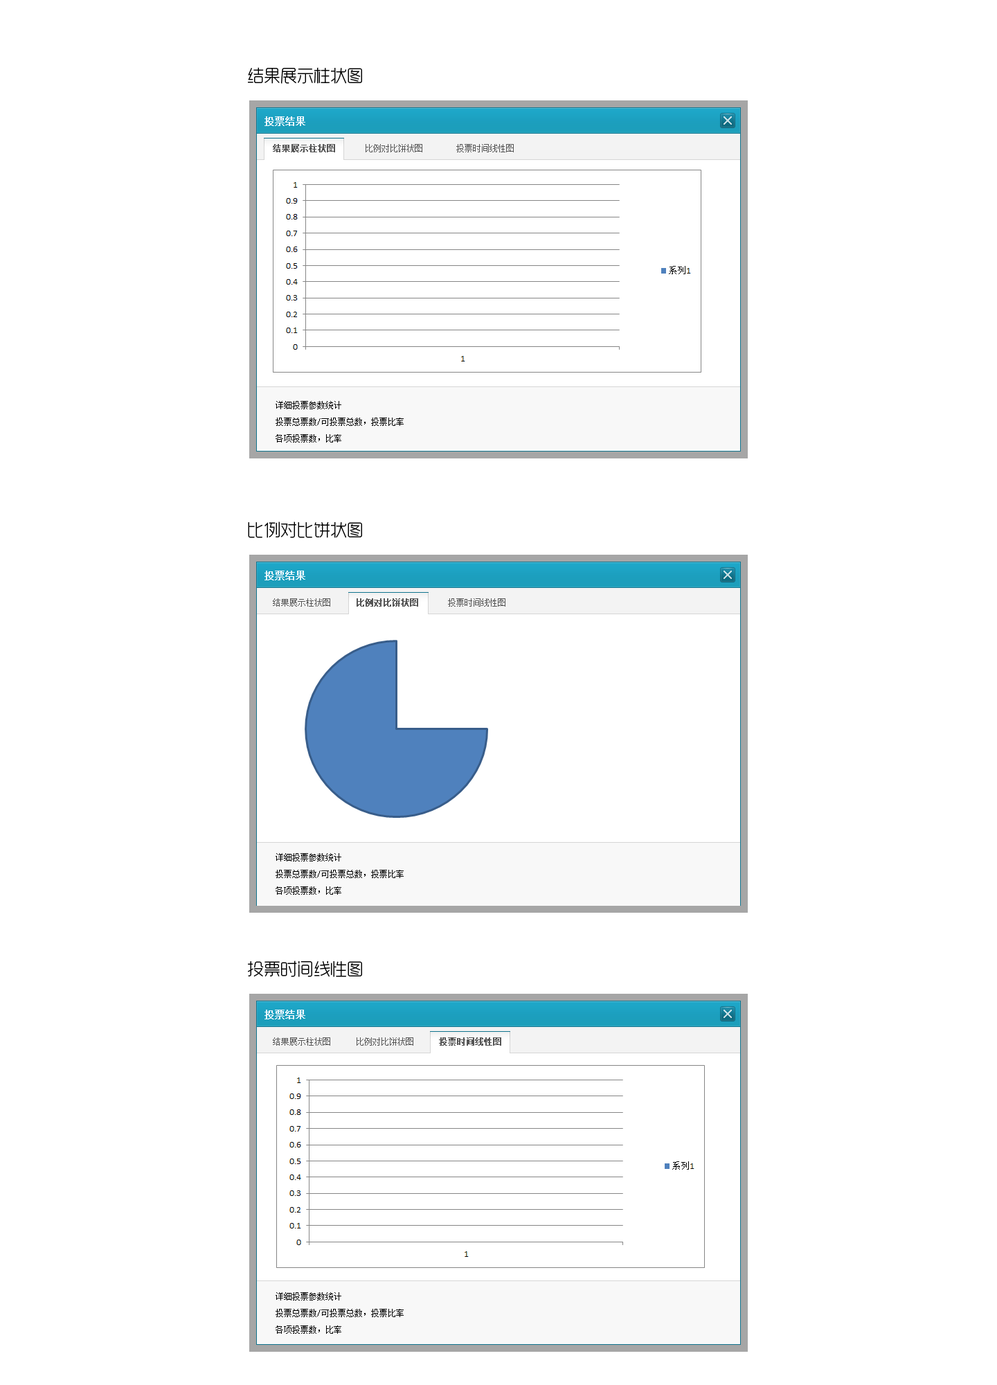
<style>
.page{position:relative;width:997px;height:1385px;background:#ffffff}
.page>*{position:absolute;margin:0}
.t1{font:16.6px "RTWSYueGoTrial-Light";color:#000000}
.t2{font:9.7px "SimSun";color:#eef7fe;font-weight:bold}
.t3{font:8.3px "SimSun";color:#555555}
.t4{font:8.3px "SimSun";color:#555555;font-weight:bold}
.t5{font:8.3px/16.6px "SimSun";color:#000000}
</style>
<div class="page">
<p class="t1" style="left:248px;top:67px;width:114px;height:17px">结果展示柱状图</p>
<p class="t2" style="left:264px;top:116px;width:41px;height:10px">投票结果</p>
<p class="t3" style="left:273px;top:144px;width:241px;height:8px"><span class="t4">结果展示柱状图      </span>比例对比饼状图        投票时间线性图</p>
<p class="t5" style="left:276px;top:401px;width:128px;height:41px">详细投票参数统计<br>投票总票数/可投票总数，投票比率<br>各项投票数，比率</p>
<p class="t1" style="left:248px;top:521px;width:114px;height:17px">比例对比饼状图</p>
<p class="t2" style="left:264px;top:570px;width:41px;height:10px">投票结果</p>
<p class="t3" style="left:273px;top:598px;width:232px;height:8px">结果展示柱状图      <span class="t4">比例对比饼状图      </span>投票时间线性图</p>
<p class="t5" style="left:276px;top:853px;width:128px;height:41px">详细投票参数统计<br>投票总票数/可投票总数，投票比率<br>各项投票数，比率</p>
<p class="t1" style="left:248px;top:960px;width:114px;height:17px">投票时间线性图</p>
<p class="t2" style="left:264px;top:1009px;width:41px;height:10px">投票结果</p>
<p class="t3" style="left:273px;top:1037px;width:228px;height:8px">结果展示柱状图      比例对比饼状图      <span class="t4">投票时间线性图</span></p>
<p class="t5" style="left:276px;top:1292px;width:128px;height:41px">详细投票参数统计<br>投票总票数/可投票总数，投票比率<br>各项投票数，比率</p>
</div>
